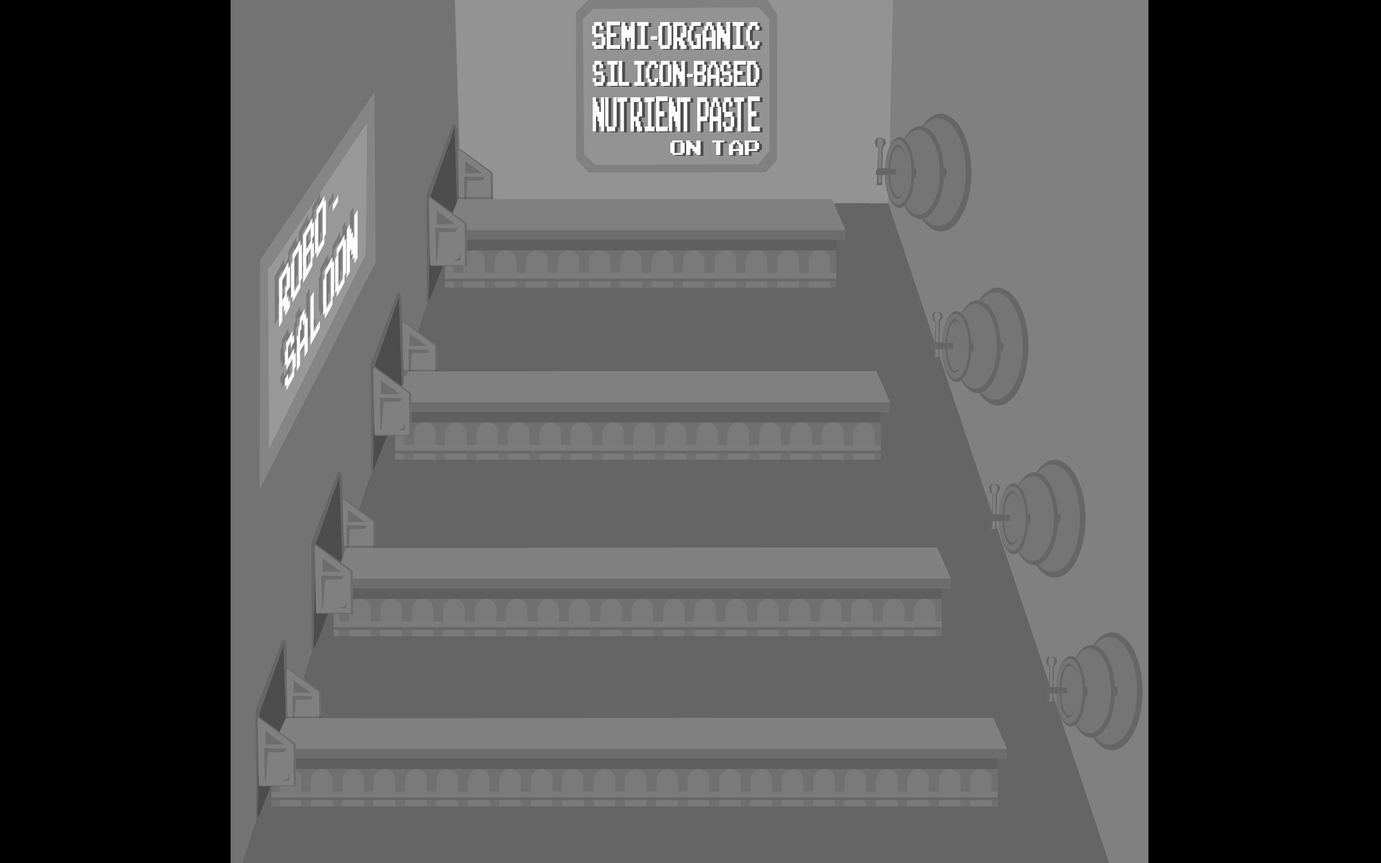
<style>
.page{position:relative;width:1381px;height:863px;background:#000000}
.page>*{position:absolute;margin:0}
.t1{font:54.7px "ArcadeClassic";color:#fcfcfc;scale:0.48 1}
.t2{font:54.7px "MyriadPro-Regular";color:#fcfcfc;scale:0.48 1}
.t3{font:49px "ArcadeClassic";color:#fcfcfc;scale:0.5 1}
.t4{font:49px "MyriadPro-Regular";color:#fcfcfc;scale:0.5 1}
.t5{font:68.6px "ArcadeClassic";color:#fcfcfc;scale:0.34 1}
.t6{font:28.8px "ArcadeClassic";color:#fcfcfc}
.t7{font:95.5px "ArcadeClassic";color:#fcfcfc;scale:0.48 1}
.t8{font:95.5px "MyriadPro-Regular";color:#fcfcfc;scale:0.48 1}
</style>
<div class="page">
<p class="t1" style="left:592px;top:22px;width:168px;height:27px">SEMI<span class="t2">-</span>ORGANIC</p>
<p class="t3" style="left:593px;top:61px;width:167px;height:25px">Silicon<span class="t4">-</span>BASED</p>
<p class="t5" style="left:593px;top:96px;width:167px;height:35px">NUTRIENT PASTE</p>
<p class="t6" style="left:670px;top:141px;width:89px;height:14px">ON   TAP</p>
<p class="t7" style="left:279px;top:195px;width:59px;height:132px;rotate:-62deg">ROBO  <span class="t8">-</span></p>
<p class="t7" style="left:285px;top:210px;width:73px;height:180px;rotate:-62deg">SA LOON</p>
</div>
